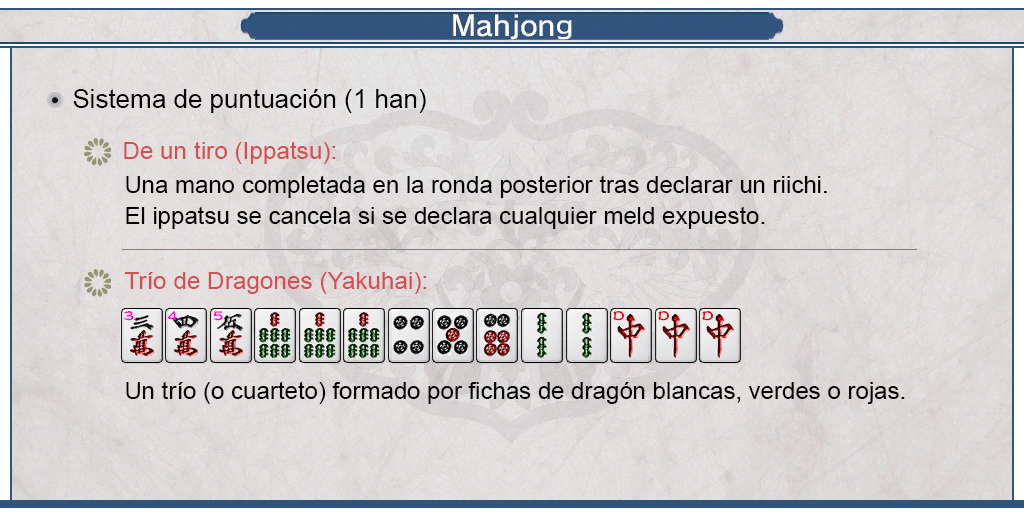
<style>
.page{position:relative;width:1024px;height:512px}
.page>*{position:absolute;margin:0}
.t1{font:26px "ArialMT";color:#000000}
.t2{font:24px "ArialMT";color:#d64d52}
.t3{font:24px/31px "ArialMT";color:#000000}
.t4{font:24px "ArialMT";color:#000000}
</style>
<div class="page">
<p class="t1" style="left:73px;top:89px;width:353px;height:24px">Sistema de puntuación (1 han)</p>
<p class="t2" style="left:124px;top:141px;width:212px;height:23px">De un tiro (Ippatsu):</p>
<p class="t3" style="left:126px;top:175px;width:701px;height:54px;text-align:justify">Una mano completada en la ronda posterior tras declarar un riichi.<br>El ippatsu se cancela si se declara cualquier meld expuesto.</p>
<p class="t2" style="left:124px;top:272px;width:303px;height:22px">Trío de Dragones (Yakuhai):</p>
<p class="t4" style="left:126px;top:381px;width:779px;height:23px">Un trío (o cuarteto) formado por fichas de dragón blancas, verdes o rojas.</p>
</div>
